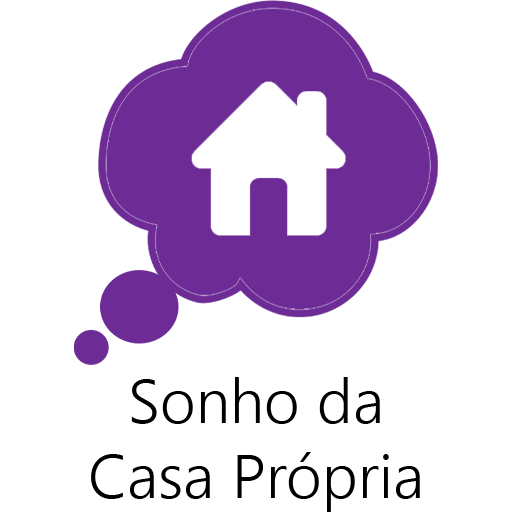
<style>
.page{position:relative;width:512px;height:512px;background:#ffffff}
.page>*{position:absolute;margin:0}
.t1{font:62.2px "SegoeUI-Semilight";color:#000000}
</style>
<div class="page">
<p class="t1" style="left:91px;top:377px;width:329px;height:135px;text-align:center">Sonho da<br>Casa Própria</p>
</div>
